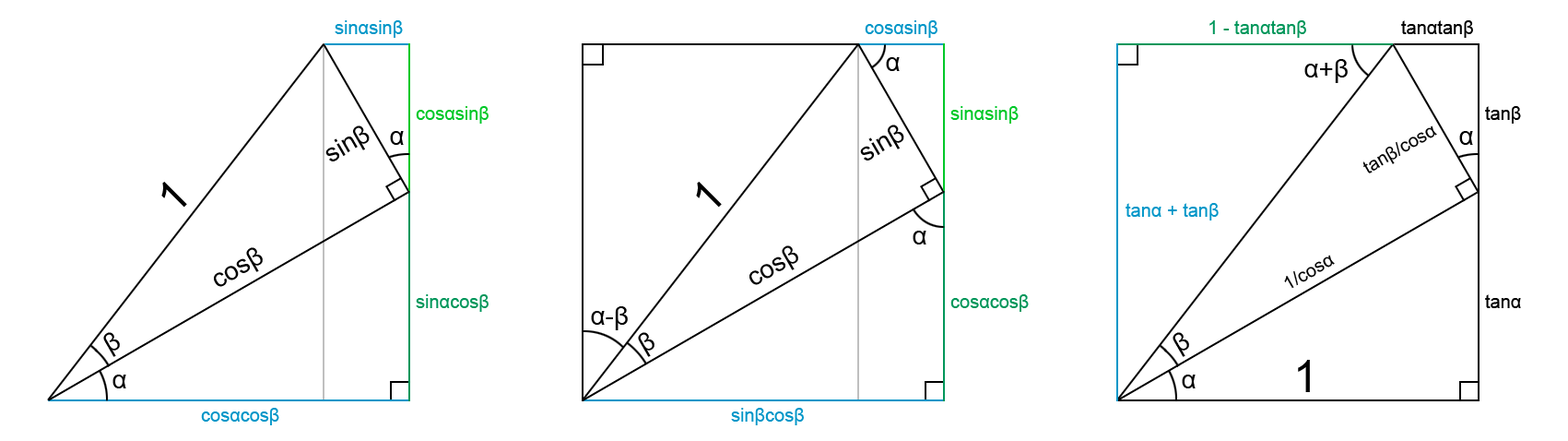
<style>
.page{position:relative;width:1568px;height:441px;background:#ffffff}
.page>*{position:absolute;margin:0}
.t1{font:18.4px "ArialMT";color:#0096c8}
.t2{font:18.4px "ArialMT";color:#00965a}
.t3{font:18.4px "ArialMT";color:#000000}
.t4{font:25.8px "ArialMT";color:#000000}
.t5{font:18.4px "ArialMT";color:#00c828}
.t6{font:44.3px "ArialMT";color:#000000}
</style>
<div class="page">
<p class="t1" style="left:335px;top:20px;width:68px;height:18px">sinαsinβ</p>
<p class="t1" style="left:865px;top:20px;width:72px;height:18px">cosαsinβ</p>
<p class="t2" style="left:1209px;top:20px;width:97px;height:18px">1 - tanαtanβ</p>
<p class="t3" style="left:1401px;top:20px;width:72px;height:18px">tanαtanβ</p>
<p class="t4" style="left:886px;top:57px;width:14px;height:14px">α</p>
<p class="t4" style="left:1304px;top:59px;width:44px;height:24px">α+β</p>
<p class="t5" style="left:416px;top:106px;width:73px;height:18px">cosαsinβ</p>
<p class="t5" style="left:950px;top:106px;width:69px;height:18px">sinαsinβ</p>
<p class="t3" style="left:1485px;top:106px;width:36px;height:18px">tanβ</p>
<p class="t4" style="left:325px;top:125px;width:45px;height:36px;rotate:-30deg">sinβ</p>
<p class="t4" style="left:860px;top:124px;width:44px;height:36px;rotate:-30deg">sinβ</p>
<p class="t3" style="left:1362px;top:125px;width:75px;height:48px;rotate:-30deg">tanβ/cosα</p>
<p class="t4" style="left:390px;top:131px;width:14px;height:14px">α</p>
<p class="t4" style="left:1459px;top:131px;width:14px;height:14px">α</p>
<p class="t6" style="left:161px;top:182px;width:26px;height:25px;rotate:-45deg">1</p>
<p class="t6" style="left:696px;top:182px;width:26px;height:25px;rotate:-45deg">1</p>
<p class="t1" style="left:1126px;top:203px;width:93px;height:17px">tanα + tanβ</p>
<p class="t4" style="left:913px;top:230px;width:13px;height:14px">α</p>
<p class="t4" style="left:749px;top:245px;width:49px;height:40px;rotate:-30deg">cosβ</p>
<p class="t4" style="left:214px;top:247px;width:49px;height:40px;rotate:-30deg">cosβ</p>
<p class="t3" style="left:1284px;top:254px;width:51px;height:35px;rotate:-30deg">1/cosα</p>
<p class="t2" style="left:416px;top:294px;width:73px;height:18px">sinαcosβ</p>
<p class="t2" style="left:950px;top:294px;width:79px;height:18px">cosαcosβ</p>
<p class="t3" style="left:1485px;top:294px;width:36px;height:14px">tanα</p>
<p class="t4" style="left:591px;top:306px;width:37px;height:24px">α-β</p>
<p class="t4" style="left:103px;top:332px;width:17px;height:25px;rotate:-30deg">β</p>
<p class="t4" style="left:638px;top:332px;width:16px;height:25px;rotate:-30deg">β</p>
<p class="t4" style="left:1173px;top:332px;width:16px;height:25px;rotate:-30deg">β</p>
<p class="t6" style="left:1298px;top:360px;width:12px;height:32px">1</p>
<p class="t4" style="left:112px;top:374px;width:14px;height:14px">α</p>
<p class="t4" style="left:1182px;top:374px;width:14px;height:14px">α</p>
<p class="t1" style="left:201px;top:407px;width:78px;height:18px">cosαcosβ</p>
<p class="t1" style="left:731px;top:407px;width:73px;height:18px">sinβcosβ</p>
</div>
